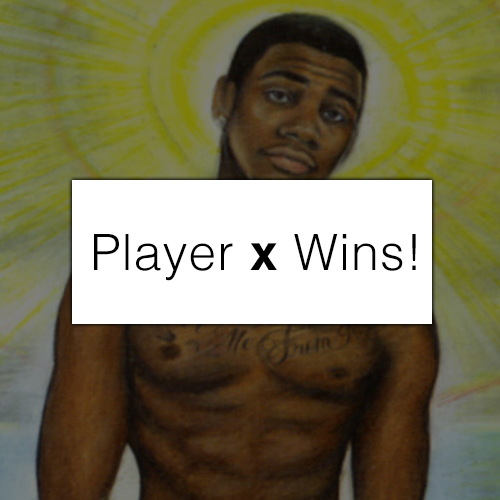
<style>
.page{position:relative;width:500px;height:500px}
.page>*{position:absolute;margin:0}
.t1{font:50px "Helvetica-Light";letter-spacing:0.02em;color:#000000}
.t2{font:50px "Helvetica-Bold";letter-spacing:0.02em;color:#000000}
</style>
<div class="page">
<p class="t1" style="left:94px;top:234px;width:322px;height:47px">Player <span class="t2">x </span>Wins!</p>
</div>
